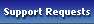
<style>
.page{position:relative;width:94px;height:24px}
.page>*{position:absolute;margin:0}
.t1{font:10px "Tahoma-Bold";color:#ffffff}
</style>
<div class="page">
<p class="t1" style="left:4px;top:8px;width:86px;height:9px">Support Requests</p>
</div>
